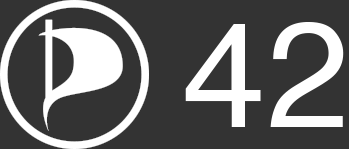
<style>
.page{position:relative;width:349px;height:149px;background:#333333}
.page>*{position:absolute;margin:0}
.t1{font:150px "Helvetica";color:#ffffff}
</style>
<div class="page">
<p class="t1" style="left:185px;top:22px;width:159px;height:105px">42</p>
</div>
